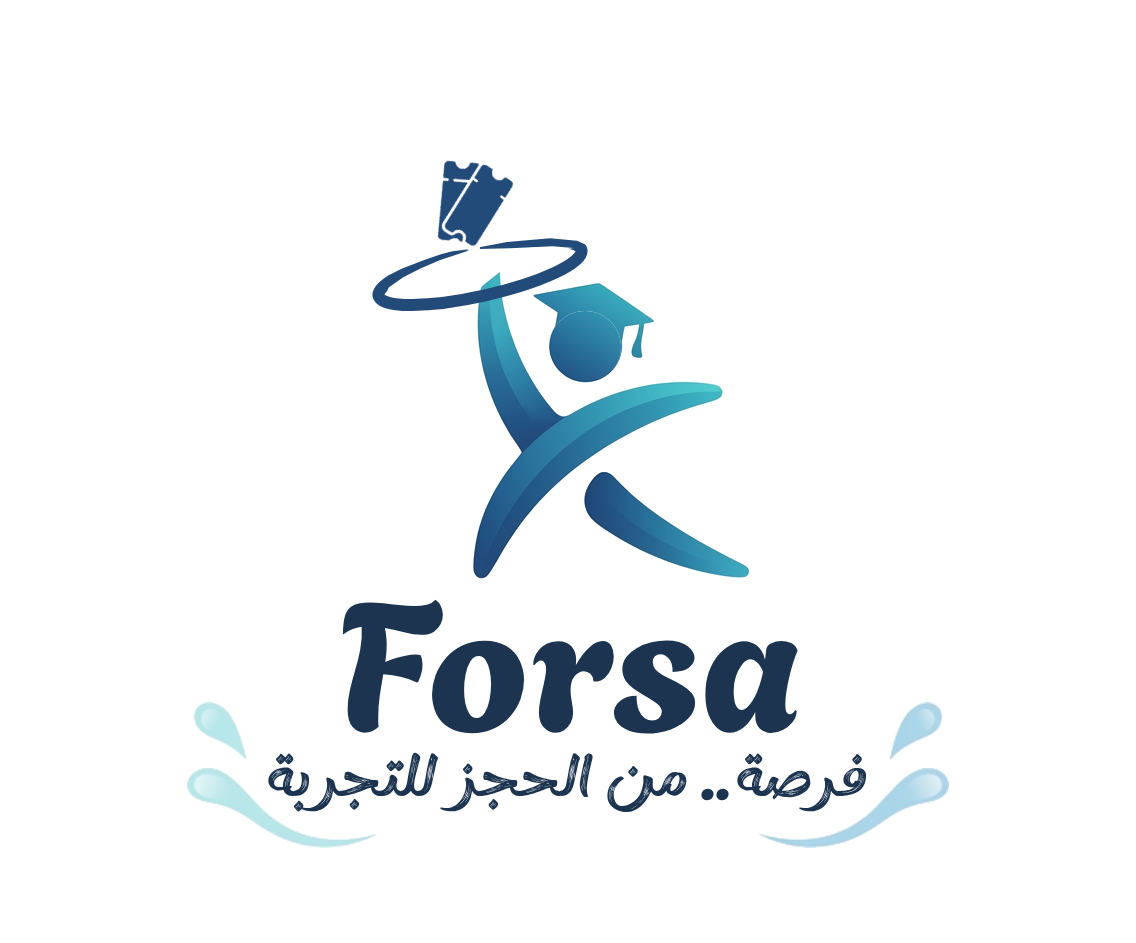
<style>
.page{position:relative;width:1136px;height:943px;background:#ffffff}
.page>*{position:absolute;margin:0}
.t1{font:180px "Agbalumo-Regular";color:#1c3450}
.t2{font:60px "InkBrushArabic_DEMO-Textured";color:#1c3450}
.t3{font:60px "Agbalumo-Regular";color:#1c3450}
</style>
<div class="page">
<p class="t1" style="left:342px;top:599px;width:456px;height:135px">Forsa</p>
<p class="t2" style="left:267px;top:752px;width:601px;height:61px">فرصة   من الحجز للتجربة</p>
<p class="t3" style="left:701px;top:788px;width:28px;height:13px">..</p>
</div>
